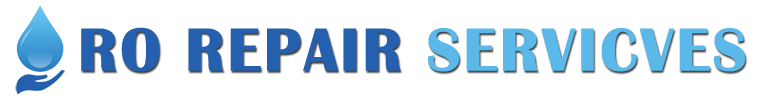
<style>
.page{position:relative;width:768px;height:105px;background:#ffffff}
.page>*{position:absolute;margin:0}
.t1{font:62.5px "BritannicBold";letter-spacing:0.02em;color:#2560ae;text-transform:uppercase;font-weight:bold}
.t2{font:62.5px "BritannicBold";letter-spacing:0.02em;color:#5ab9e9;text-transform:uppercase;font-weight:bold}
</style>
<div class="page">
<p class="t1" style="left:81px;top:27px;width:665px;height:45px">RO Repair <span class="t2">SERVICVES</span></p>
</div>
